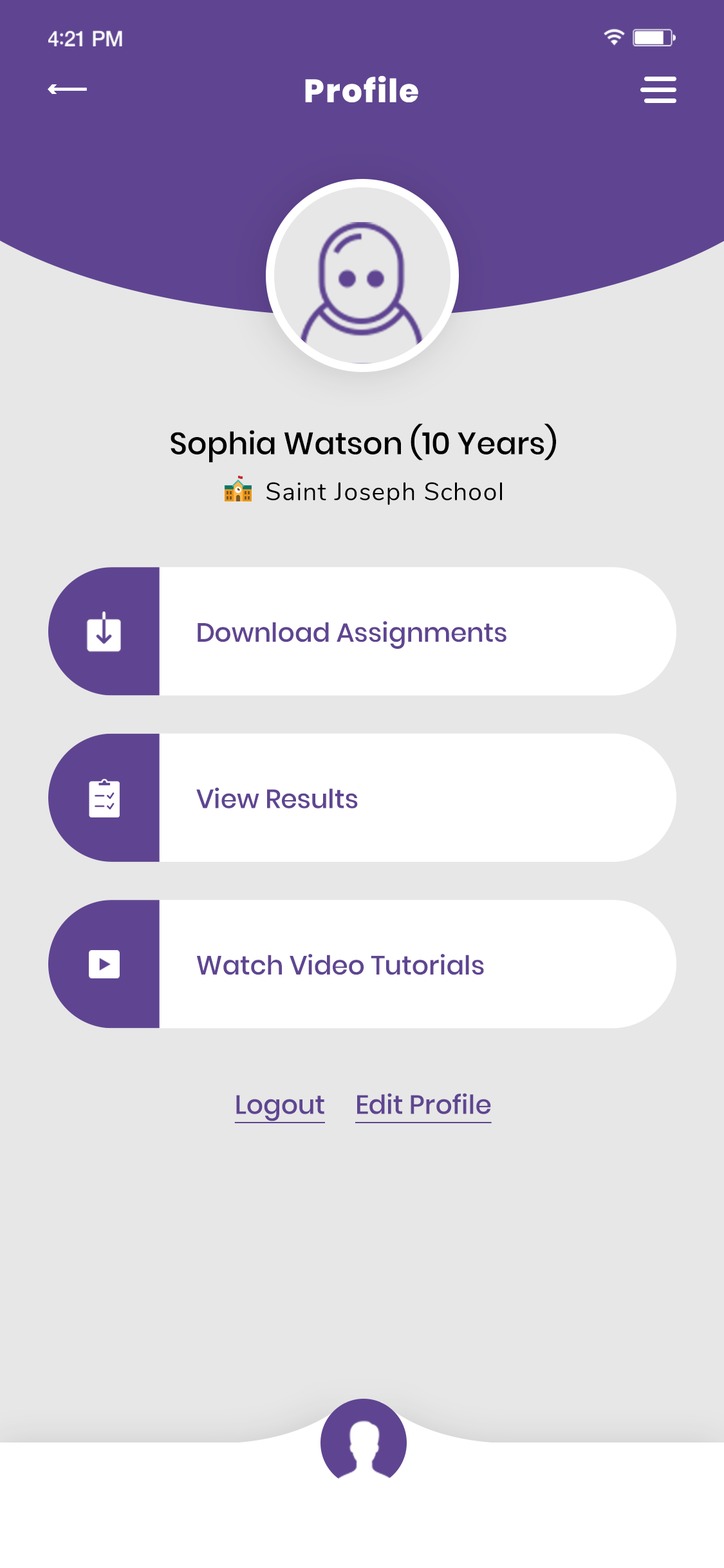
<style>
.page{position:relative;width:724px;height:1568px;background:#e7e7e7}
.page>*{position:absolute;margin:0}
.t1{font:32.2px "Poppins-ExtraBold";letter-spacing:0.04em;color:#ffffff}
.t2{font:21.9px "Poppins-Bold";letter-spacing:-0.245em;color:#ffffff}
.t3{font:30.9px "Poppins-Medium";letter-spacing:-0.005em;color:#000000}
.t4{font:25.1px "Nunito-Regular";letter-spacing:0.04em;color:#000000}
.t5{font:26.4px "Poppins-Medium";letter-spacing:-0.005em;color:#5f4591}
.t6{font:26.4px "Poppins-Medium";letter-spacing:-0.005em;color:#5f4591;text-decoration:underline}
</style>
<div class="page">
<p class="t1" style="left:305px;top:76px;width:113px;height:26px">Profile</p>
<p class="t2" style="left:48px;top:84px;width:39px;height:10px">&lt;-----</p>
<p class="t3" style="left:171px;top:424px;width:385px;height:39px">Sophia Watson (10 Years)</p>
<p class="t4" style="left:266px;top:482px;width:236px;height:23px">Saint Joseph School</p>
<p class="t5" style="left:198px;top:621px;width:309px;height:28px">Download Assignments</p>
<p class="t5" style="left:196px;top:787px;width:162px;height:21px">View Results</p>
<p class="t5" style="left:196px;top:954px;width:288px;height:21px">Watch Video Tutorials</p>
<p class="t6" style="left:234px;top:1093px;width:258px;height:30px">Logout     Edit Profile</p>
</div>
